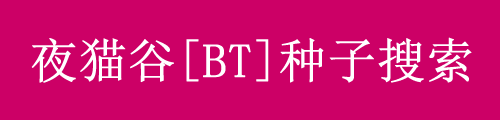
<style>
.page{position:relative;width:500px;height:120px;background:#cc0066}
.page>*{position:absolute;margin:0}
.t1{font:48px "SimSun";color:#ffffff;font-weight:bold}
</style>
<div class="page">
<p class="t1" style="left:31px;top:37px;width:441px;height:46px">夜猫谷[BT]种子搜索</p>
</div>
